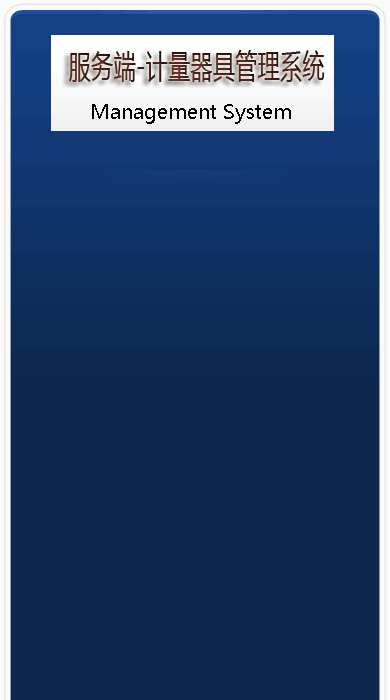
<style>
.page{position:relative;width:390px;height:700px;background:#0d274f}
.page>*{position:absolute;margin:0}
.t1{font:33.2px "MicrosoftYaHei";scale:0.68 1}
</style>
<div class="page">
<p class="t1" style="left:69px;top:50px;width:256px;height:32px">服务端-计量器具管理系统</p>
</div>
